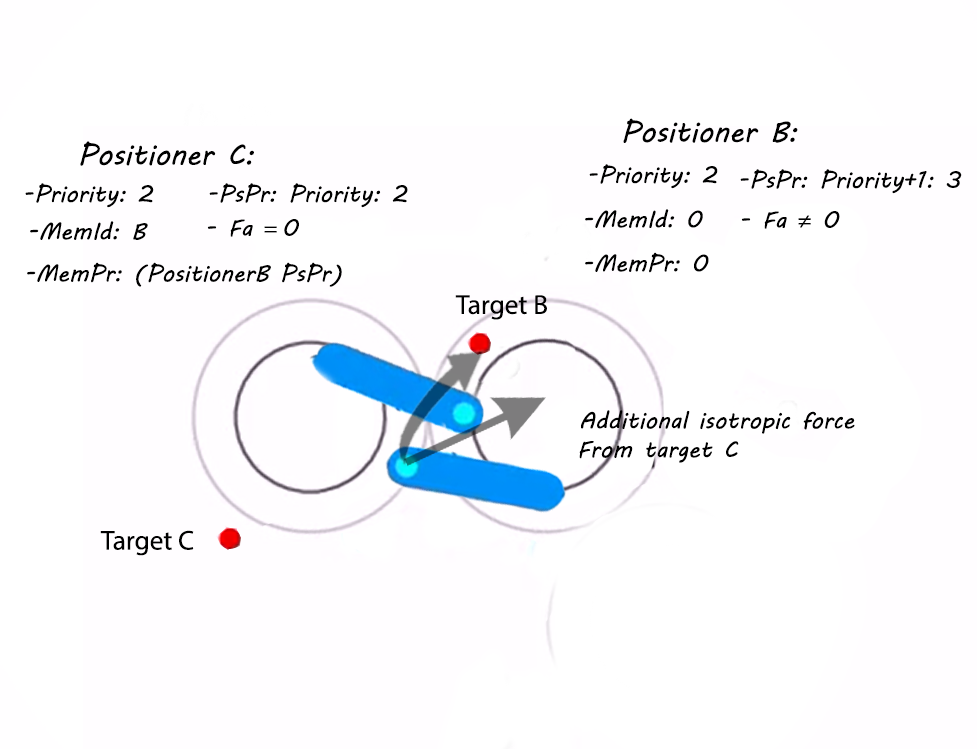
<style>
.page{position:relative;width:977px;height:749px;background:#ffffff}
.page>*{position:absolute;margin:0}
.t1{font:50px "MVBoli";color:#000000}
.t2{font:40px "MVBoli";color:#000000}
.t3{font:40px "MyriadPro-Regular";color:#000000}
.t4{font:46.7px "MyriadPro-Regular";color:#000000}
</style>
<div class="page">
<p class="t1" style="left:623px;top:118px;width:175px;height:25px">Positioner B:</p>
<p class="t1" style="left:80px;top:141px;width:174px;height:25px">Positioner C:</p>
<p class="t2" style="left:589px;top:164px;width:129px;height:25px">-Priority: 2</p>
<p class="t2" style="left:740px;top:169px;width:222px;height:25px">-PsPr: Priority+1: 3</p>
<p class="t2" style="left:25px;top:183px;width:129px;height:25px">-Priority: 2</p>
<p class="t2" style="left:209px;top:183px;width:199px;height:25px">-PsPr: Priority: 2</p>
<p class="t2" style="left:585px;top:209px;width:118px;height:19px">-MemId: 0</p>
<p class="t2" style="left:30px;top:221px;width:118px;height:19px">-MemId: B</p>
<p class="t2" style="left:207px;top:219px;width:92px;height:18px">- Fa <span class="t3">= </span>0</p>
<p class="t2" style="left:741px;top:211px;width:99px;height:18px">- Fa <span class="t3">≠</span> 0</p>
<p class="t2" style="left:585px;top:252px;width:124px;height:21px">-MemPr: 0</p>
<p class="t2" style="left:27px;top:262px;width:315px;height:25px">-MemPr: (PositionerB PsPr)</p>
<p class="t4" style="left:455px;top:295px;width:92px;height:25px">Target B</p>
<p class="t2" style="left:581px;top:410px;width:274px;height:24px">Additional isotropic force</p>
<p class="t2" style="left:579px;top:441px;width:160px;height:22px">From target C</p>
<p class="t4" style="left:100px;top:530px;width:94px;height:26px">Target C</p>
</div>
